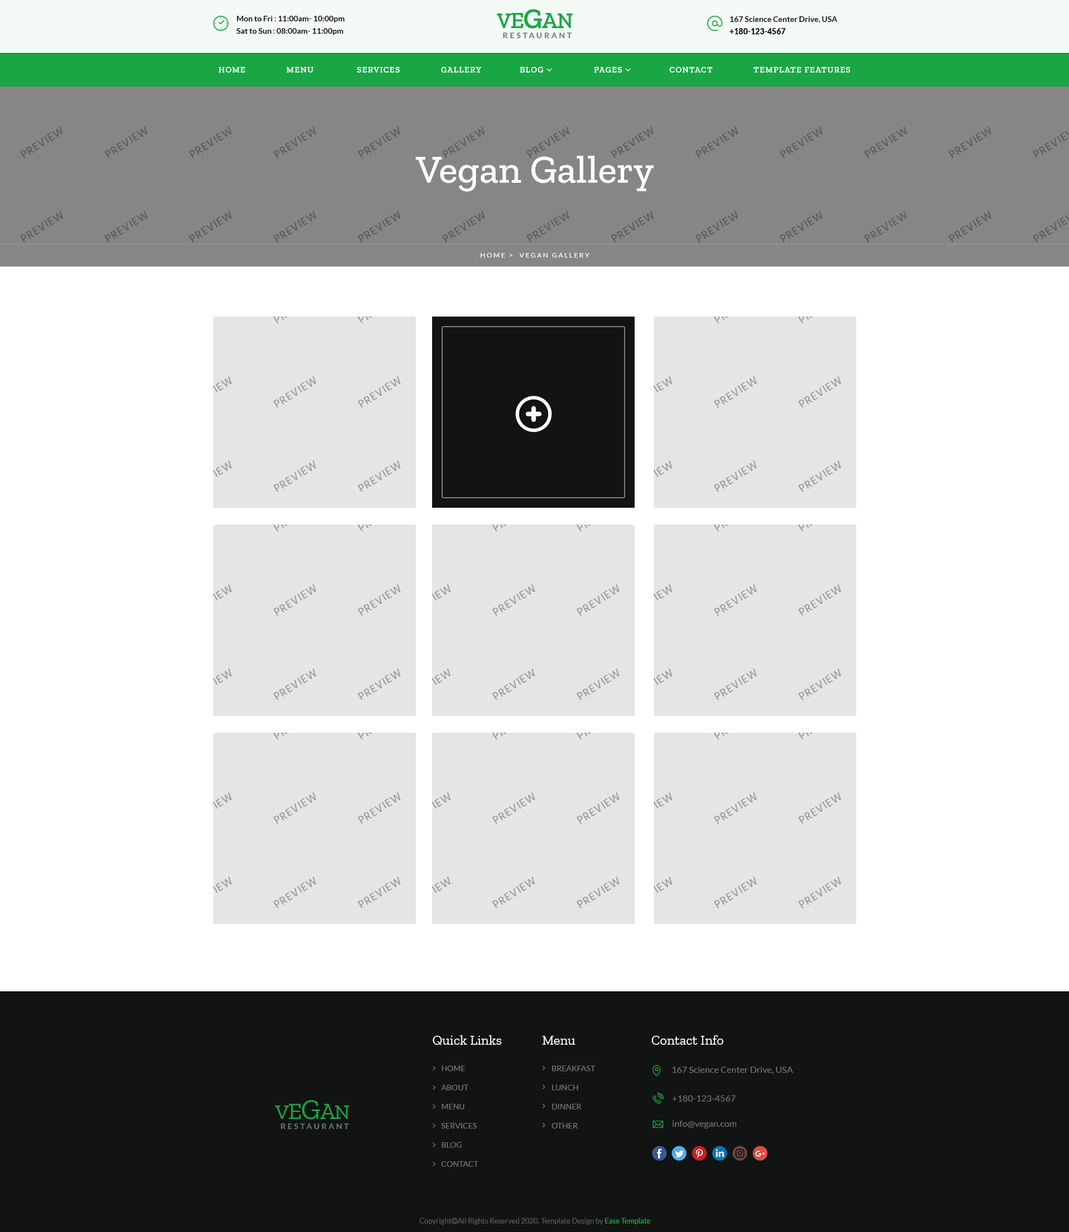
<style>
.page{position:relative;width:1069px;height:1232px;background:#ffffff}
.page>*{position:absolute;margin:0}
.t1{font:7.9px/12.4px "Lato-Bold";color:#121312}
.t2{font:7.9px/12.4px "Lato-Regular";color:#121312}
.t3{font:21.4px "ZillaSlab-SemiBold";letter-spacing:-0.03em;color:#1aa644;text-transform:uppercase}
.t4{font:23.6px "ZillaSlab-SemiBold";letter-spacing:-0.03em;color:#1aa644;text-transform:uppercase}
.t5{font:28.1px "ZillaSlab-SemiBold";letter-spacing:-0.03em;color:#1aa644;text-transform:uppercase}
.t6{font:7.9px/12.4px "Lato-Black";color:#121312}
.t7{font:7.9px "Lato-Bold";letter-spacing:0.26em;color:#6e726e;text-transform:uppercase}
.t8{font:39.4px "ZillaSlab-Medium";color:#ffffff}
.t9{font:6.8px "Lato-Regular";letter-spacing:0.2em;color:#ffffff;text-transform:uppercase}
.t10{font:13.5px "ZillaSlab-Regular";color:#ffffff}
.t11{font:7.9px/19.1px "Lato-Regular";color:#6e726e;text-transform:uppercase}
.t12{font:9px "Lato-Regular";color:#6e726e}
.t13{font:21.4px "ZillaSlab-Regular";letter-spacing:-0.03em;color:#1aa644;text-transform:uppercase}
.t14{font:23.6px "ZillaSlab-Regular";letter-spacing:-0.03em;color:#1aa644;text-transform:uppercase}
.t15{font:28.1px "ZillaSlab-Regular";letter-spacing:-0.03em;color:#1aa644;text-transform:uppercase}
.t16{font:7.9px "Lato-Bold";letter-spacing:0.25em;color:#6e726e;text-transform:uppercase}
</style>
<div class="page">
<p class="t1" style="left:236px;top:16px;width:109px;height:19px">Mon to Fri<span class="t2"> : </span>11:00am- 10:00pm<br>Sat to Sun<span class="t2"> : </span>08:00am- 11:00pm</p>
<p class="t3" style="left:497px;top:9px;width:76px;height:20px">V<span class="t4">e</span><span class="t5">G</span><span class="t4">a</span>n</p>
<p class="t1" style="left:730px;top:16px;width:108px;height:18px">167 Science Center Drive, USA<br><span class="t6">+180-123-4567</span></p>
<p class="t7" style="left:503px;top:33px;width:69px;height:5px">Restaurant</p>
<p class="t8" style="left:415px;top:156px;width:239px;height:36px">Vegan Gallery</p>
<p class="t9" style="left:480px;top:253px;width:110px;height:5px">Home &gt;  Vegan Gallery</p>
<p class="t10" style="left:433px;top:1036px;width:69px;height:10px">Quick Links</p>
<p class="t10" style="left:542px;top:1036px;width:33px;height:9px">Menu</p>
<p class="t10" style="left:651px;top:1036px;width:72px;height:9px">Contact Info</p>
<p class="t11" style="left:441px;top:1066px;width:37px;height:101px">Home<br>About<br>Menu<br>Services<br>Blog<br>Contact</p>
<p class="t11" style="left:551px;top:1066px;width:44px;height:63px">Breakfast<br>Lunch<br>Dinner<br>Other</p>
<p class="t12" style="left:672px;top:1067px;width:121px;height:7px">167 Science Center Drive, USA</p>
<p class="t12" style="left:672px;top:1096px;width:64px;height:6px">+180-123-4567</p>
<p class="t13" style="left:274px;top:1100px;width:75px;height:20px">V<span class="t14">e</span><span class="t15">G</span><span class="t14">a</span>n</p>
<p class="t12" style="left:672px;top:1121px;width:64px;height:8px">info@vegan.com</p>
<p class="t16" style="left:281px;top:1124px;width:68px;height:6px">Restaurant</p>
</div>
